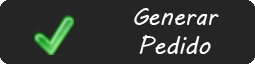
<style>
.page{position:relative;width:255px;height:64px;background:#252525}
.page>*{position:absolute;margin:0}
.t1{font:24px "MVBoli";color:#ffffff}
</style>
<div class="page">
<p class="t1" style="left:134px;top:8px;width:85px;height:46px;text-align:center">Generar Pedido</p>
</div>
